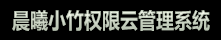
<style>
.page{position:relative;width:221px;height:40px;background:#000000}
.page>*{position:absolute;margin:0}
.t1{font:21.6px "MicrosoftYaHei-Bold";color:#c4cdbd;scale:0.83 1}
</style>
<div class="page">
<p class="t1" style="left:12px;top:10px;width:198px;height:21px">晨曦小竹权限云管理系统</p>
</div>
